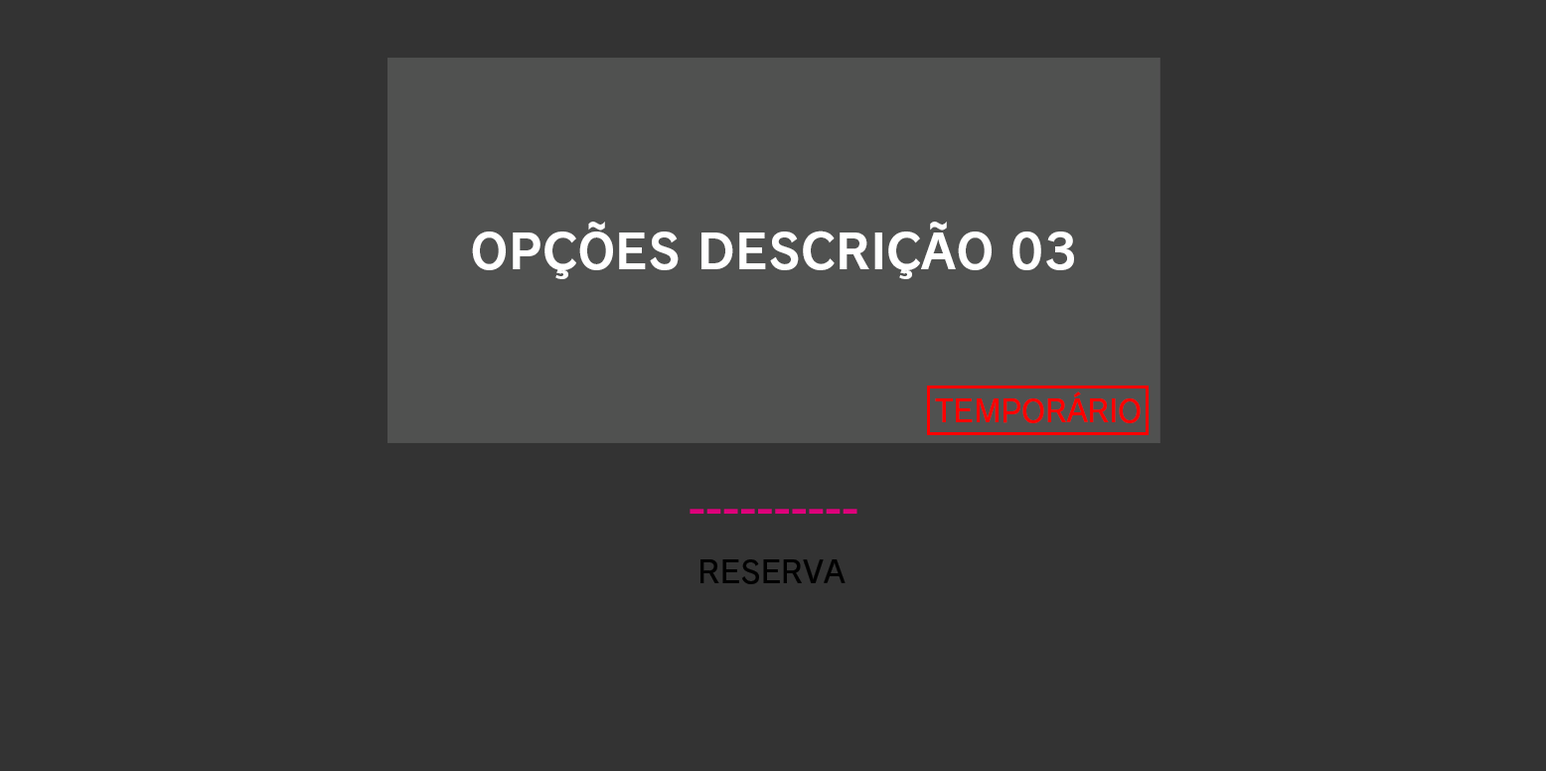
<style>
.page{position:relative;width:1546px;height:771px;background:#333333}
.page>*{position:absolute;margin:0}
.t1{font:47.7px "RodinNTLGPro-B";color:#ffffff}
.t2{font:30.5px "RodinProN-DB";letter-spacing:-0.014em;color:#ff0000}
.t3{font:30.5px "RodinNTLGPro-DB";color:#010101}
</style>
<div class="page">
<p class="t1" style="left:472px;top:222px;width:602px;height:57px">OPÇÕES DESCRIÇÃO 03</p>
<p class="t2" style="left:935px;top:392px;width:206px;height:31px">TEMPORÁRIO</p>
<p class="t3" style="left:701px;top:559px;width:145px;height:25px">RESERVA</p>
</div>
